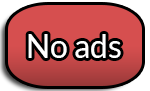
<style>
.page{position:relative;width:150px;height:91px;background:#d64f4f}
.page>*{position:absolute;margin:0}
.t1{font:32px "Lato-Regular";color:#ffffff}
</style>
<div class="page">
<p class="t1" style="left:28px;top:34px;width:93px;height:24px">No ads</p>
</div>
